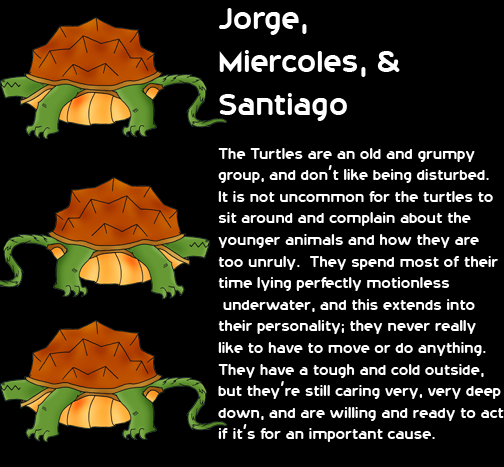
<style>
.page{position:relative;width:504px;height:467px;background:#000000}
.page>*{position:absolute;margin:0}
.t1{font:18px "20thCenturyFont";color:#fefefe}
.t2{font:36px "20thCenturyFont";color:#fefefe}
</style>
<div class="page">
<p class="t1" style="left:218px;top:8px;width:286px;height:434px"><span class="t2">Jorge,<br>Miercoles, &amp; <br>Santiago<br></span><br>The Turtles are an old and grumpy<br>group, and don’t like being disturbed.<br>It is not uncommon for the turtles to <br>sit around and complain about the <br>younger animals and how they are <br>too unruly.  They spend most of their <br>time lying perfectly motionless<br> underwater, and this extends into <br>their personality; they never really <br>like to have to move or do anything. <br>They have a tough and cold outside, <br>but they’re still caring very, very deep <br>down, and are willing and ready to act<br>if it’s for an important cause.</p>
</div>
